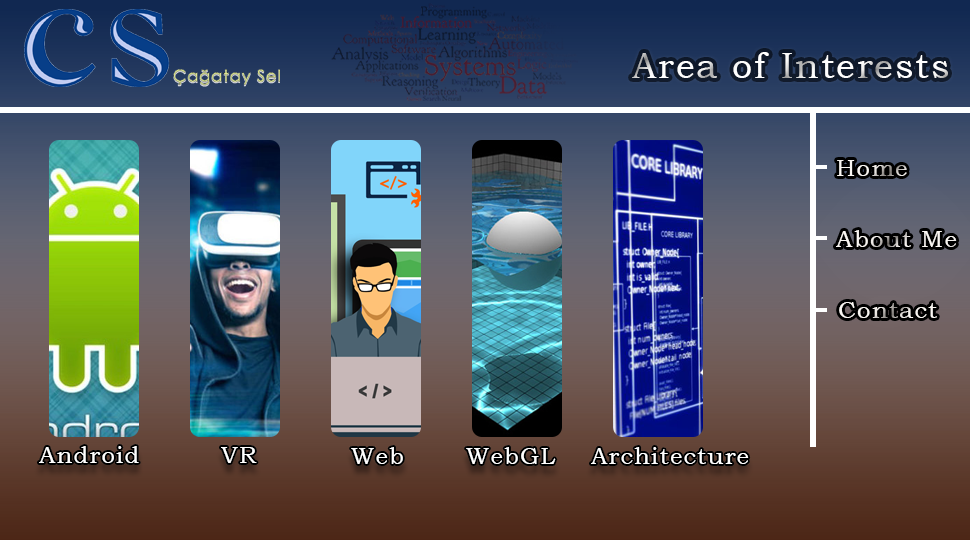
<style>
.page{position:relative;width:970px;height:540px}
.page>*{position:absolute;margin:0}
.t1{font:36px "BookmanOldStyle";letter-spacing:0.05em;color:#ffffff}
.t2{font:24px "BookmanOldStyle";letter-spacing:0.05em}
.t3{font:24px "BookmanOldStyle";letter-spacing:0.05em;color:#f9f5f2}
.t4{font:24px "BookmanOldStyle";letter-spacing:0.05em;color:#f6f2ef}
.t5{font:24px "BookmanOldStyle";letter-spacing:0.05em;color:#ffffff}
</style>
<div class="page">
<p class="t1" style="left:632px;top:52px;width:316px;height:26px">Area of Interests</p>
<p class="t2" style="left:837px;top:160px;width:70px;height:16px">Home</p>
<p class="t3" style="left:836px;top:230px;width:121px;height:17px">About Me</p>
<p class="t4" style="left:839px;top:302px;width:98px;height:16px">Contact</p>
<p class="t5" style="left:39px;top:446px;width:100px;height:17px">Android</p>
<p class="t5" style="left:221px;top:447px;width:36px;height:16px">VR</p>
<p class="t5" style="left:351px;top:447px;width:52px;height:17px">Web</p>
<p class="t5" style="left:466px;top:447px;width:90px;height:17px">WebGL</p>
<p class="t5" style="left:591px;top:447px;width:158px;height:17px">Architecture</p>
</div>
